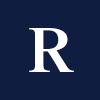
<style>
.page{position:relative;width:100px;height:100px;background:#0f1d41}
.page>*{position:absolute;margin:0}
.t1{font:61.4px "SuisseWorks-Medium";color:#ffffff}
</style>
<div class="page">
<p class="t1" style="left:29px;top:28px;width:45px;height:44px">R</p>
</div>
